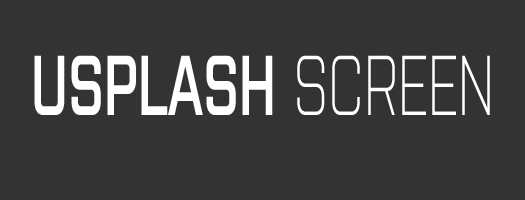
<style>
.page{position:relative;width:525px;height:200px;background:#333333}
.page>*{position:absolute;margin:0}
.t1{font:84.7px "Purista-SemiBold";color:#ffffff;scale:0.65 1}
.t2{font:84.7px "Purista-Light";color:#ffffff;scale:0.65 1}
</style>
<div class="page">
<p class="t1" style="left:34px;top:55px;width:456px;height:60px">USPLASH <span class="t2">SCREEN</span></p>
</div>
